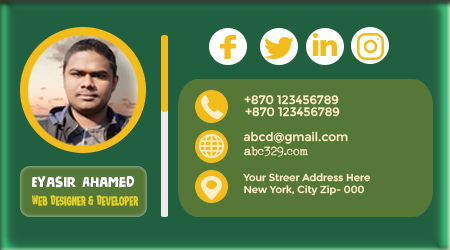
<style>
.page{position:relative;width:450px;height:250px;background:#557737}
.page>*{position:absolute;margin:0}
.t1{font:12px "Montserrat-Regular";color:#fceec6}
.t2{font:12px "1952RHEINMETALL";color:#fceec6}
.t3{font:10px "Montserrat-Regular";color:#fceec6}
.t4{font:15px "NicknameDEMO";color:#ffffff}
.t5{font:14.3px "NightmareAlleyStaggered";color:#e0d125;scale:0.86 1}
</style>
<div class="page">
<p class="t1" style="left:244px;top:95px;width:95px;height:10px">+870 123456789</p>
<p class="t1" style="left:245px;top:107px;width:95px;height:10px">+870 123456789</p>
<p class="t1" style="left:243px;top:131px;width:105px;height:13px">abcd@gmail.com</p>
<p class="t2" style="left:244px;top:146px;width:64px;height:11px">abc329.com</p>
<p class="t3" style="left:243px;top:173px;width:127px;height:23px">Your Streer Address Here<br>New York, City Zip- 000</p>
<p class="t4" style="left:32px;top:176px;width:103px;height:12px">Eyasir  Ahamed</p>
<p class="t5" style="left:31px;top:195px;width:108px;height:11px">Web Designer &amp; Developer</p>
</div>
